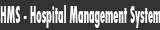
<style>
.page{position:relative;width:160px;height:30px;background:#333333}
.page>*{position:absolute;margin:0}
.t1{font:25.6px "TwCenMT-CondensedExtraBold";color:#fefefe;scale:0.46 1}
</style>
<div class="page">
<p class="t1" style="left:0px;top:5px;width:161px;height:23px">HMS - Hospital Management System</p>
</div>
